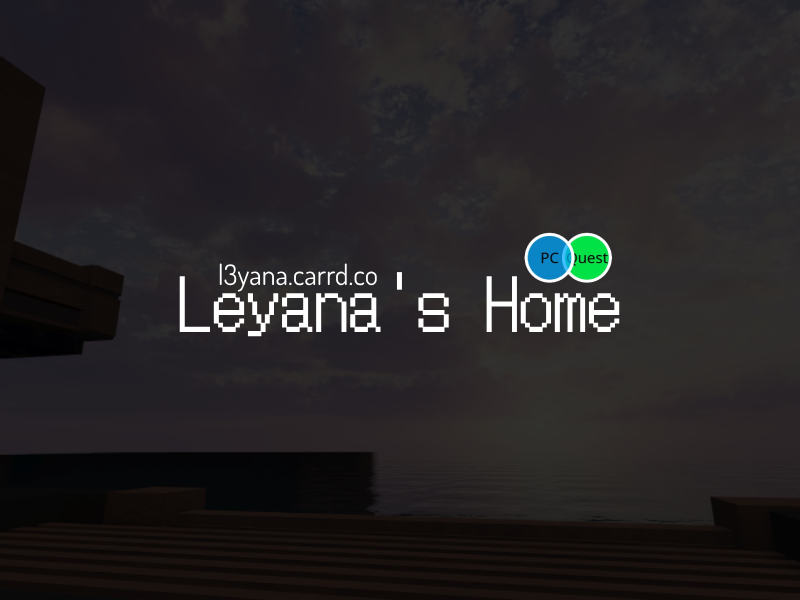
<style>
.page{position:relative;width:800px;height:600px}
.page>*{position:absolute;margin:0}
.t1{font:28.2px "Dosis-Regular";color:#ffffff}
.t2{font:68.2px "DotGothic16-Regular";color:#ffffff}
</style>
<div class="page">
<p class="t1" style="left:219px;top:263px;width:158px;height:29px">l3yana.carrd.co</p>
<p class="t2" style="left:179px;top:272px;width:441px;height:65px">Leyana's Home</p>
</div>
